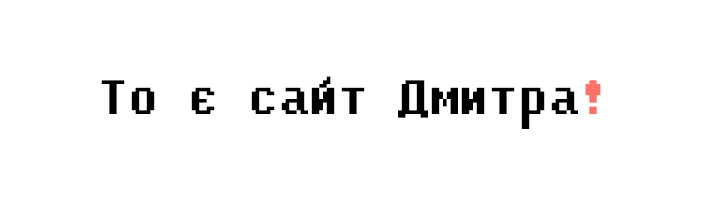
<style>
.page{position:relative;width:705px;height:200px;background:#ffffff}
.page>*{position:absolute;margin:0}
.t1{font:48px "Fixedsys";color:#000000}
.t2{font:48px "Fixedsys";color:#fa7268}
</style>
<div class="page">
<p class="t1" style="left:101px;top:76px;width:500px;height:53px">То є сайт Дмитра<span class="t2">!</span></p>
</div>
